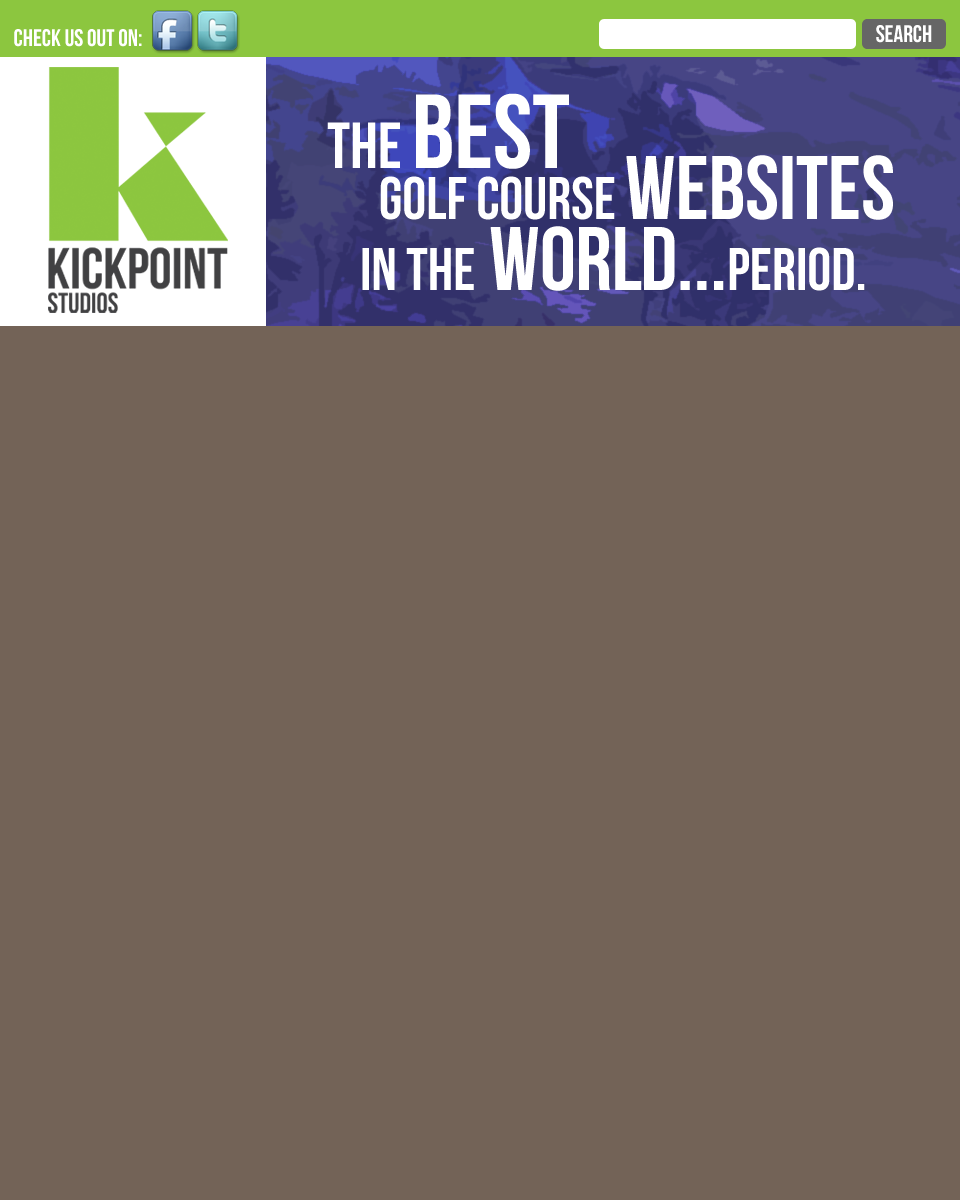
<style>
.page{position:relative;width:960px;height:1200px;background:#736357}
.page>*{position:absolute;margin:0}
.t1{font:24px "BebasNeue";color:#ffffff}
.t2{font:105px "BebasNeue";color:#ffffff}
.t3{font:65px "BebasNeue";color:#ffffff}
.t4{font:60px "BebasNeue";color:#ffffff}
.t5{font:90px "BebasNeue";color:#ffffff}
</style>
<div class="page">
<p class="t1" style="left:14px;top:29px;width:128px;height:18px">check us out on:</p>
<p class="t1" style="left:876px;top:25px;width:56px;height:18px">search</p>
<p class="t2" style="left:327px;top:93px;width:242px;height:76px"><span class="t3">the </span>best</p>
<p class="t4" style="left:380px;top:155px;width:513px;height:65px">golf course <span class="t5">websites</span></p>
<p class="t5" style="left:362px;top:226px;width:503px;height:65px"><span class="t4">in the</span> world...<span class="t4">period.</span></p>
</div>
